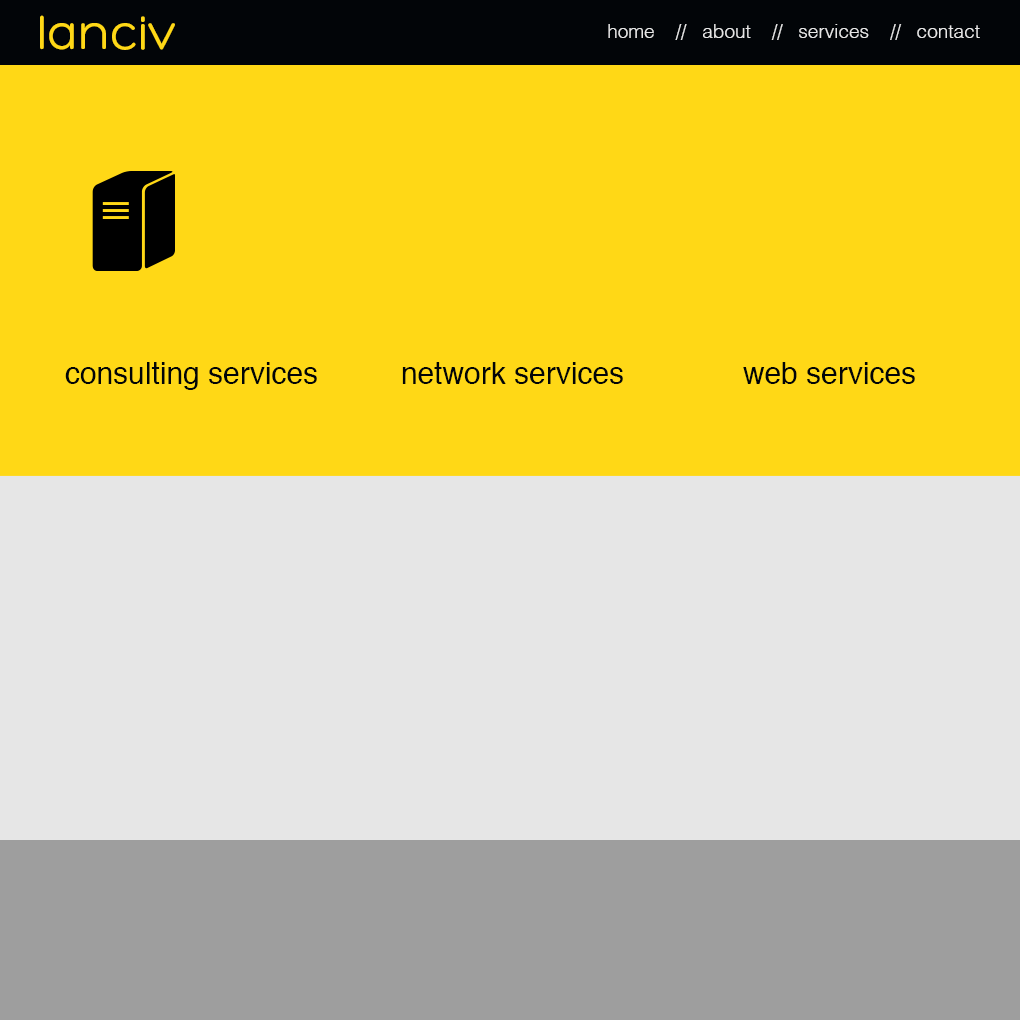
<style>
.page{position:relative;width:1020px;height:1020px;background:#ffd816}
.page>*{position:absolute;margin:0}
.t1{font:50px "Hero";color:#ffd816}
.t2{font:19px "Helvetica-Light";color:#e6e6e6}
.t3{font:30px "Helvetica";color:#020508}
</style>
<div class="page">
<p class="t1" style="left:40px;top:15px;width:135px;height:35px">lanciv</p>
<p class="t2" style="left:608px;top:24px;width:372px;height:16px">home    //   about    //   services    //   contact</p>
<p class="t3" style="left:65px;top:362px;width:252px;height:28px">consulting services</p>
<p class="t3" style="left:402px;top:362px;width:221px;height:22px">network services</p>
<p class="t3" style="left:743px;top:362px;width:172px;height:22px">web services</p>
</div>
